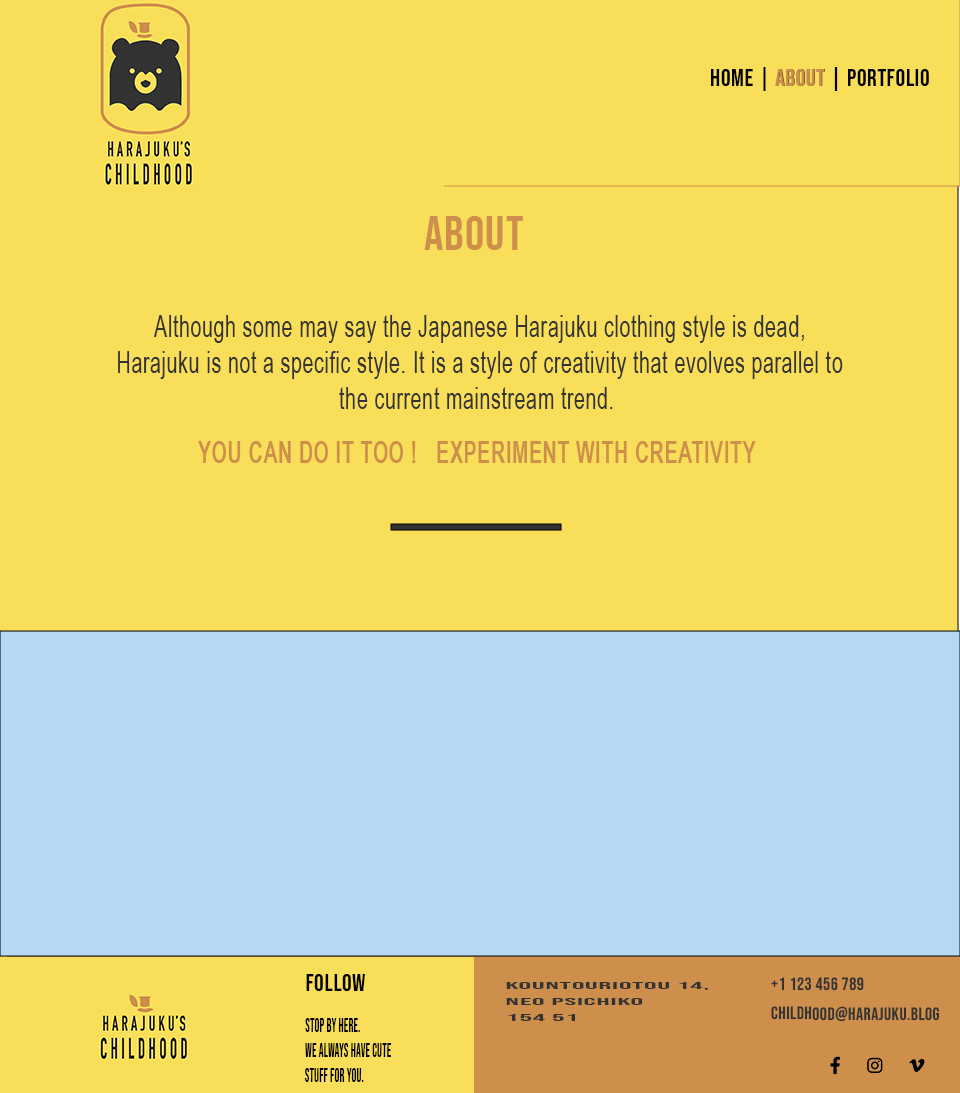
<style>
.page{position:relative;width:960px;height:1093px;background:#f8de59}
.page>*{position:absolute;margin:0}
.t1{font:24px "BebasNeue-Regular";letter-spacing:0.025em;color:#000000}
.t2{font:24px "BebasNeue-Regular";letter-spacing:0.025em;color:#cf8f4c}
.t3{font:48px "BebasNeue-Regular";letter-spacing:0.025em;color:#cf8f4c}
.t4{font:30.9px/18px "ArialNarrow";letter-spacing:0.025em;color:#333333;scale:0.78 1}
.t5{font:30.9px/18px "ArialNarrow-Bold";letter-spacing:0.025em;color:#cf8f4c;scale:0.78 1}
.t6{font:18px/29.3px "BebasNeue-Regular";letter-spacing:0.025em;color:#333333}
.t7{font:9.8px/16px "BebasNeue-Regular";letter-spacing:0.025em;color:#333333;scale:3.19 1}
.t8{font:18.9px/25.2px "BebasNeue-Regular";letter-spacing:0.025em;color:#000000;scale:0.62 1}
</style>
<div class="page">
<p class="t1" style="left:711px;top:67px;width:218px;height:24px">HOME | ABOUT | PORTFOLIO</p>
<p class="t2" style="left:775px;top:69px;width:50px;height:17px">ABOUT</p>
<p class="t3" style="left:424px;top:216px;width:99px;height:34px">ABOUT</p>
<p class="t4" style="left:118px;top:315px;width:725px;height:148px;text-align:center">Although some may say the Japanese Harajuku clothing style is dead,<br><br>Harajuku is not a specific style. It is a style of creativity that evolves parallel to<br> <br>the current mainstream trend. <br><br><br><span class="t5">YOU CAN DO IT TOO !   EXPERIMENT WITH CREATIVITY</span></p>
<p class="t1" style="left:306px;top:974px;width:59px;height:17px">FOLLOW</p>
<p class="t6" style="left:771px;top:977px;width:169px;height:45px">+1 123 456 789<br>childhood@harajuku.blog</p>
<p class="t7" style="left:506px;top:982px;width:203px;height:39px">Kountouriotou 14,<br>Neo Psichiko<br>154 51</p>
<p class="t8" style="left:304px;top:1018px;width:88px;height:64px">stop by here. <br>we always have cute <br>stuff for you.</p>
</div>
